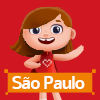
<style>
.page{position:relative;width:100px;height:100px;background:#d01620}
.page>*{position:absolute;margin:0}
.t1{font:18px "Alef-Bold";letter-spacing:-0.075em;color:#fefefe}
</style>
<div class="page">
<p class="t1" style="left:12px;top:76px;width:73px;height:13px">São Paulo</p>
</div>
